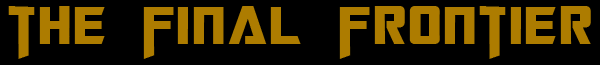
<style>
.page{position:relative;width:600px;height:65px;background:#000000}
.page>*{position:absolute;margin:0}
.t1{font:60px "TransformersMovie";letter-spacing:0.06em;color:#ad7c00}
</style>
<div class="page">
<p class="t1" style="left:8px;top:6px;width:583px;height:53px">the final frontier</p>
</div>
